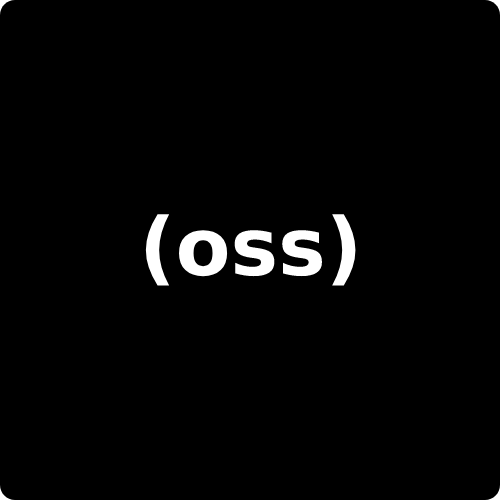
<style>
.page{position:relative;width:500px;height:500px;background:#000000}
.page>*{position:absolute;margin:0}
.t1{font:80px "DejaVuSans-Bold";color:#ffffff}
</style>
<div class="page">
<p class="t1" style="left:145px;top:214px;width:211px;height:72px">(oss)</p>
</div>
